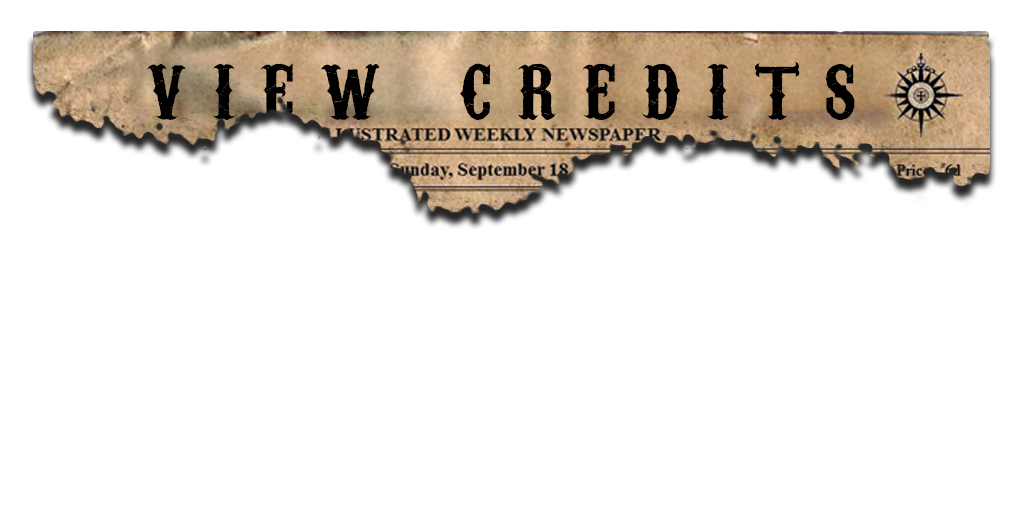
<style>
.page{position:relative;width:1024px;height:512px;background:#ffffff}
.page>*{position:absolute;margin:0}
.t1{font:95.8px "CarnivaleeFreakshow";letter-spacing:0.28em;color:#000000}
</style>
<div class="page">
<p class="t1" style="left:147px;top:61px;width:708px;height:59px">view credits</p>
</div>
